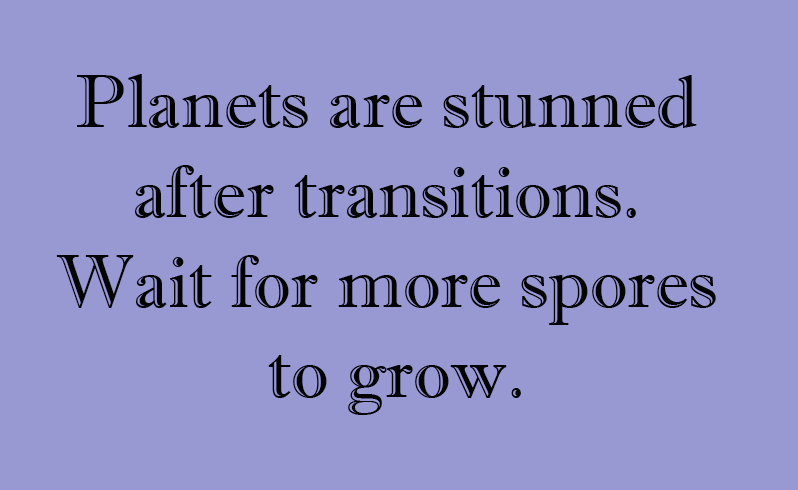
<style>
.page{position:relative;width:798px;height:490px;background:#9898d3}
.page>*{position:absolute;margin:0}
.t1{font:74.8px "ImprintMT-Shadow";color:#030303}
</style>
<div class="page">
<p class="t1" style="left:56px;top:74px;width:660px;height:341px;text-align:center">Planets are stunned <br>after transitions. <br>Wait for more spores <br>to grow.</p>
</div>
